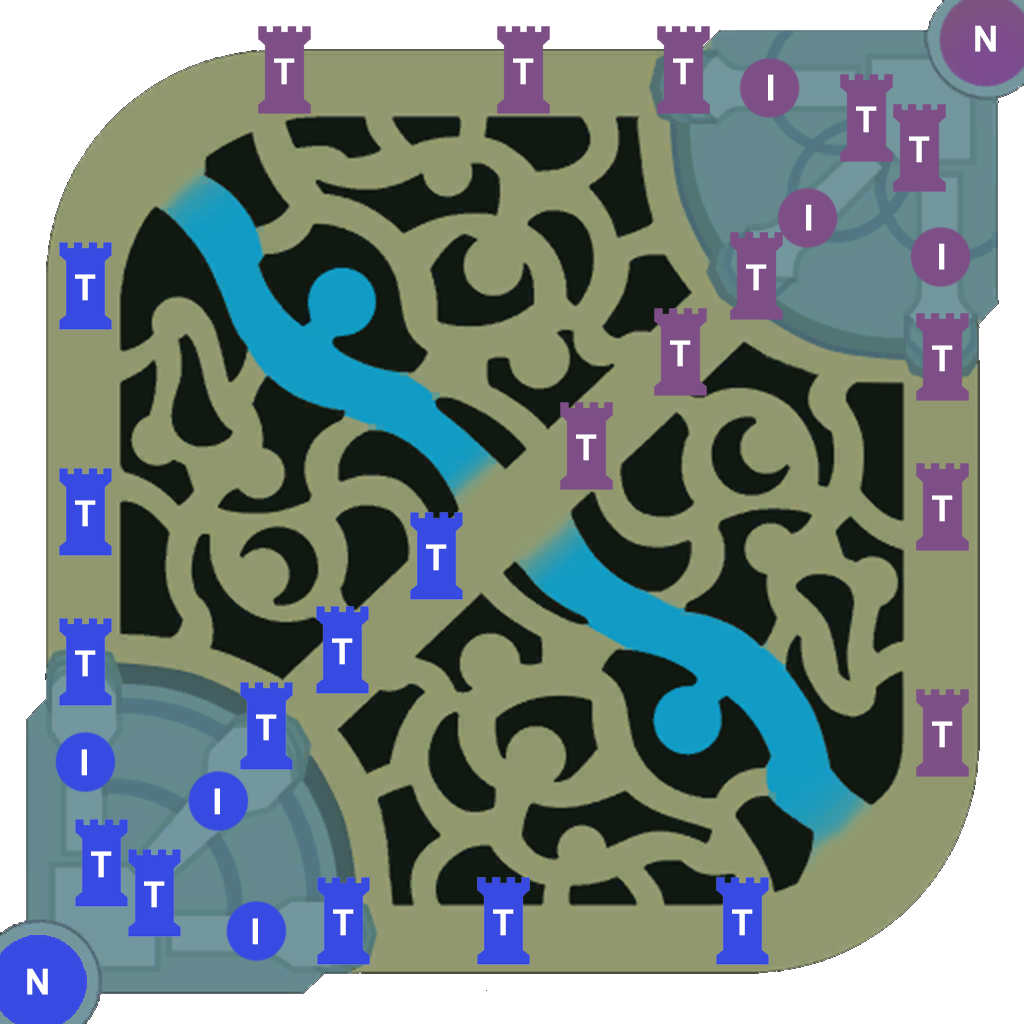
<style>
.page{position:relative;width:1024px;height:1024px;background:#919870}
.page>*{position:absolute;margin:0}
.t1{font:36px "Arial-BoldMT";color:#ffffff}
</style>
<div class="page">
<p class="t1" style="left:975px;top:25px;width:21px;height:27px">N</p>
<p class="t1" style="left:274px;top:58px;width:21px;height:27px">T</p>
<p class="t1" style="left:513px;top:58px;width:21px;height:27px">T</p>
<p class="t1" style="left:673px;top:58px;width:21px;height:27px">T</p>
<p class="t1" style="left:768px;top:74px;width:6px;height:27px;rotate:180deg">I</p>
<p class="t1" style="left:856px;top:106px;width:21px;height:27px">T</p>
<p class="t1" style="left:909px;top:136px;width:21px;height:27px">T</p>
<p class="t1" style="left:806px;top:204px;width:6px;height:27px;rotate:180deg">I</p>
<p class="t1" style="left:939px;top:243px;width:6px;height:27px;rotate:180deg">I</p>
<p class="t1" style="left:746px;top:264px;width:21px;height:27px">T</p>
<p class="t1" style="left:75px;top:274px;width:21px;height:27px">T</p>
<p class="t1" style="left:670px;top:340px;width:21px;height:27px">T</p>
<p class="t1" style="left:932px;top:345px;width:21px;height:27px">T</p>
<p class="t1" style="left:576px;top:434px;width:21px;height:27px">T</p>
<p class="t1" style="left:932px;top:495px;width:21px;height:27px">T</p>
<p class="t1" style="left:75px;top:500px;width:21px;height:27px">T</p>
<p class="t1" style="left:426px;top:544px;width:21px;height:27px">T</p>
<p class="t1" style="left:332px;top:638px;width:21px;height:27px">T</p>
<p class="t1" style="left:75px;top:650px;width:21px;height:27px">T</p>
<p class="t1" style="left:256px;top:714px;width:21px;height:27px">T</p>
<p class="t1" style="left:932px;top:721px;width:21px;height:27px">T</p>
<p class="t1" style="left:81px;top:749px;width:6px;height:27px">I</p>
<p class="t1" style="left:214px;top:788px;width:6px;height:27px">I</p>
<p class="t1" style="left:91px;top:851px;width:21px;height:27px">T</p>
<p class="t1" style="left:144px;top:881px;width:21px;height:27px">T</p>
<p class="t1" style="left:252px;top:918px;width:6px;height:27px">I</p>
<p class="t1" style="left:333px;top:909px;width:21px;height:27px">T</p>
<p class="t1" style="left:493px;top:909px;width:21px;height:27px">T</p>
<p class="t1" style="left:732px;top:909px;width:21px;height:27px">T</p>
<p class="t1" style="left:27px;top:968px;width:21px;height:27px">N</p>
</div>
